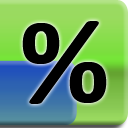
<style>
.page{position:relative;width:128px;height:128px}
.page>*{position:absolute;margin:0}
.t1{font:124px "Calibri-Bold";color:#000000}
</style>
<div class="page">
<p class="t1" style="left:22px;top:21px;width:85px;height:83px">%</p>
</div>
